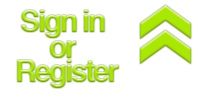
<style>
.page{position:relative;width:200px;height:100px;background:#ffffff}
.page>*{position:absolute;margin:0}
.t1{font:30px "Helvetica-Bold";letter-spacing:-0.075em;color:#a9e800}
.t2{font:30px "Helvetica-Bold";letter-spacing:-0.075em}
</style>
<div class="page">
<p class="t1" style="left:21px;top:10px;width:84px;height:28px">Sign in</p>
<p class="t2" style="left:50px;top:41px;width:27px;height:17px">or</p>
<p class="t2" style="left:17px;top:60px;width:102px;height:28px">Register</p>
</div>
